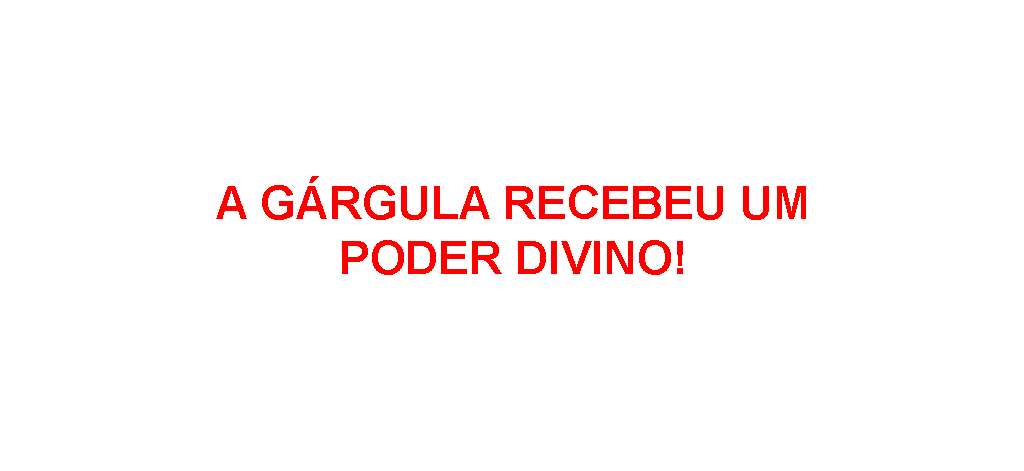
<style>
.page{position:relative;width:1024px;height:471px;background:#ffffff}
.page>*{position:absolute;margin:0}
.t1{font:45.8px "Arial-BoldMT";color:#ff0000}
</style>
<div class="page">
<p class="t1" style="left:216px;top:176px;width:590px;height:99px;text-align:center">A GÁRGULA RECEBEU UM PODER DIVINO!</p>
</div>
